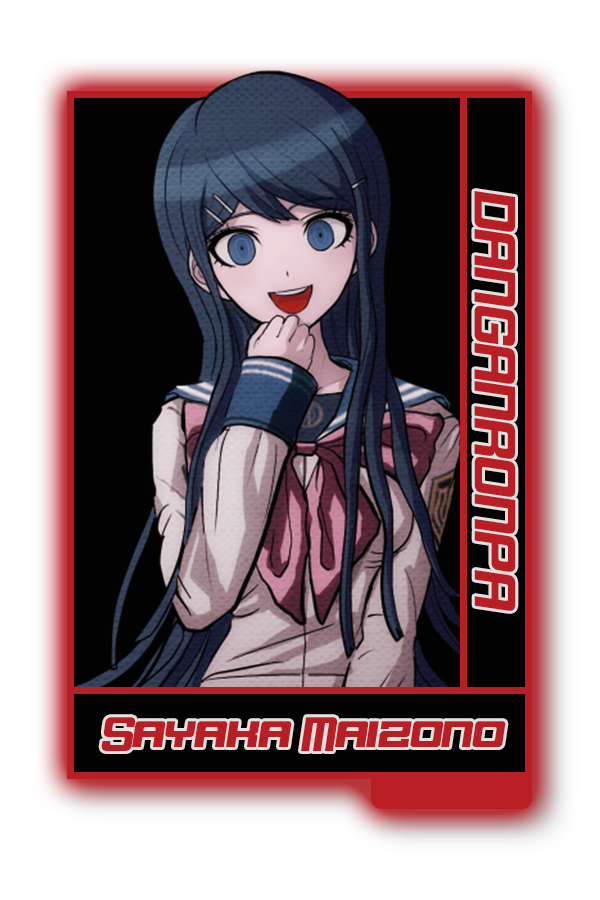
<style>
.page{position:relative;width:600px;height:900px;background:#020202}
.page>*{position:absolute;margin:0}
.t1{font:48.8px "DorBlue";color:#bb2c2e}
.t2{font:40.6px "DorBlue";color:#bb2c2e}
</style>
<div class="page">
<p class="t1" style="left:474px;top:191px;width:42px;height:420px;rotate:90deg">DANGANRONPA</p>
<p class="t2" style="left:101px;top:717px;width:405px;height:34px">Sayaka Maizono</p>
</div>
